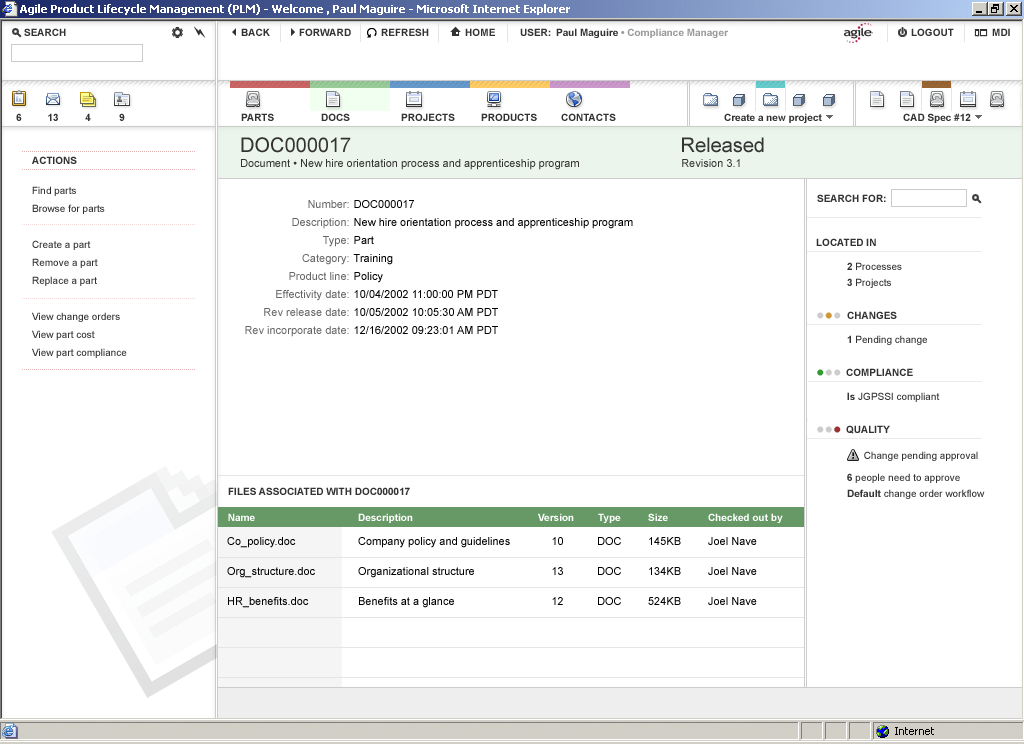
<style>
.page{position:relative;width:1024px;height:744px;background:#ffffff}
.page>*{position:absolute;margin:0}
.t1{font:20px "ArialMT";color:#333333}
.t2{font:10px "Arial-BoldMT";color:#333333}
.t3{font:11px "ArialMT";color:#333333}
.t4{font:10px/18px "ArialMT";color:#333333}
.t5{font:11px/18px "ArialMT";color:#666666}
.t6{font:11px/18px "ArialMT";color:#000000}
.t7{font:10px/16px "ArialMT";color:#333333}
.t8{font:10px/16px "Arial-BoldMT";color:#333333}
.t9{font:24px "ArialMT";color:#cccccc}
.t10{font:24px "ArialMT";color:#cc9933}
.t11{font:10px "ArialMT";color:#333333}
.t12{font:24px "ArialMT";color:#339933}
.t13{font:24px "ArialMT";color:#993333}
.t14{font:10px "Arial-BoldMT";color:#ffffff}
.t15{font:11px/30px "ArialMT";color:#000000}
</style>
<div class="page">
<p class="t1" style="left:241px;top:137px;width:523px;height:16px">DOC000017                Released</p>
<p class="t2" style="left:32px;top:156px;width:45px;height:8px">ACTIONS</p>
<p class="t3" style="left:241px;top:159px;width:499px;height:11px">Document • New hire orientation process and apprenticeship program      Revision 3.1</p>
<p class="t4" style="left:32px;top:186px;width:95px;height:172px">Find parts<br>Browse for parts<br><br>Create a part<br>Remove a part<br>Replace a part<br><br>View change orders<br>View part cost<br>View part compliance</p>
<p class="t2" style="left:817px;top:194px;width:69px;height:8px">SEARCH FOR:</p>
<p class="t5" style="left:245px;top:200px;width:104px;height:137px;text-align:right">Number:<br>Description:<br>Type:<br>Category:<br>Product line:<br>Effectivity date:<br>Rev release date:<br>Rev incorporate date:</p>
<p class="t6" style="left:353px;top:200px;width:280px;height:134px">DOC000017<br>New hire orientation process and apprenticeship program<br>Part<br>Training<br>Policy<br>10/04/2002 11:00:00 PM PDT<br>10/05/2002 10:05:30 AM PDT<br>12/16/2002 09:23:01 AM PDT</p>
<p class="t2" style="left:816px;top:238px;width:60px;height:8px">LOCATED IN</p>
<p class="t7" style="left:847px;top:262px;width:55px;height:26px"><span class="t8">2</span> Processes<br><span class="t8">3</span> Projects</p>
<p class="t9" style="left:817px;top:312px;width:24px;height:7px">•<span class="t10">•</span>•</p>
<p class="t2" style="left:847px;top:311px;width:50px;height:8px">CHANGES</p>
<p class="t11" style="left:847px;top:335px;width:80px;height:10px"><span class="t2">1</span> Pending change</p>
<p class="t9" style="left:817px;top:369px;width:24px;height:7px"><span class="t12">•</span>••</p>
<p class="t2" style="left:846px;top:368px;width:67px;height:8px">COMPLIANCE</p>
<p class="t11" style="left:847px;top:392px;width:93px;height:10px"><span class="t2">Is</span> JGPSSI compliant</p>
<p class="t2" style="left:846px;top:425px;width:44px;height:9px">QUALITY</p>
<p class="t9" style="left:817px;top:426px;width:24px;height:7px">••<span class="t13">•</span></p>
<p class="t7" style="left:847px;top:451px;width:138px;height:48px">Change pending approval<br><span class="t8">6</span> people need to approve<br><span class="t8">Default </span>change order workflow</p>
<p class="t2" style="left:228px;top:487px;width:182px;height:8px">FILES ASSOCIATED WITH DOC000017</p>
<p class="t14" style="left:228px;top:513px;width:27px;height:8px">Name</p>
<p class="t14" style="left:358px;top:513px;width:55px;height:10px">Description</p>
<p class="t14" style="left:538px;top:513px;width:36px;height:8px">Version</p>
<p class="t14" style="left:598px;top:513px;width:23px;height:10px">Type</p>
<p class="t14" style="left:648px;top:513px;width:20px;height:8px">Size</p>
<p class="t14" style="left:708px;top:513px;width:75px;height:10px">Checked out by</p>
<p class="t15" style="left:227px;top:537px;width:88px;height:71px">Co_policy.doc<br>Org_structure.doc<br>HR_benefits.doc</p>
<p class="t15" style="left:358px;top:537px;width:152px;height:71px">Company policy and guidelines<br>Organizational structure<br>Benefits at a glance</p>
<p class="t15" style="left:552px;top:537px;width:11px;height:68px">10<br>13<br>12</p>
<p class="t15" style="left:598px;top:537px;width:23px;height:68px">DOC<br>DOC<br>DOC</p>
<p class="t15" style="left:648px;top:537px;width:33px;height:68px">145KB<br>134KB<br>524KB</p>
<p class="t15" style="left:708px;top:537px;width:49px;height:68px">Joel Nave<br>Joel Nave<br>Joel Nave</p>
</div>
